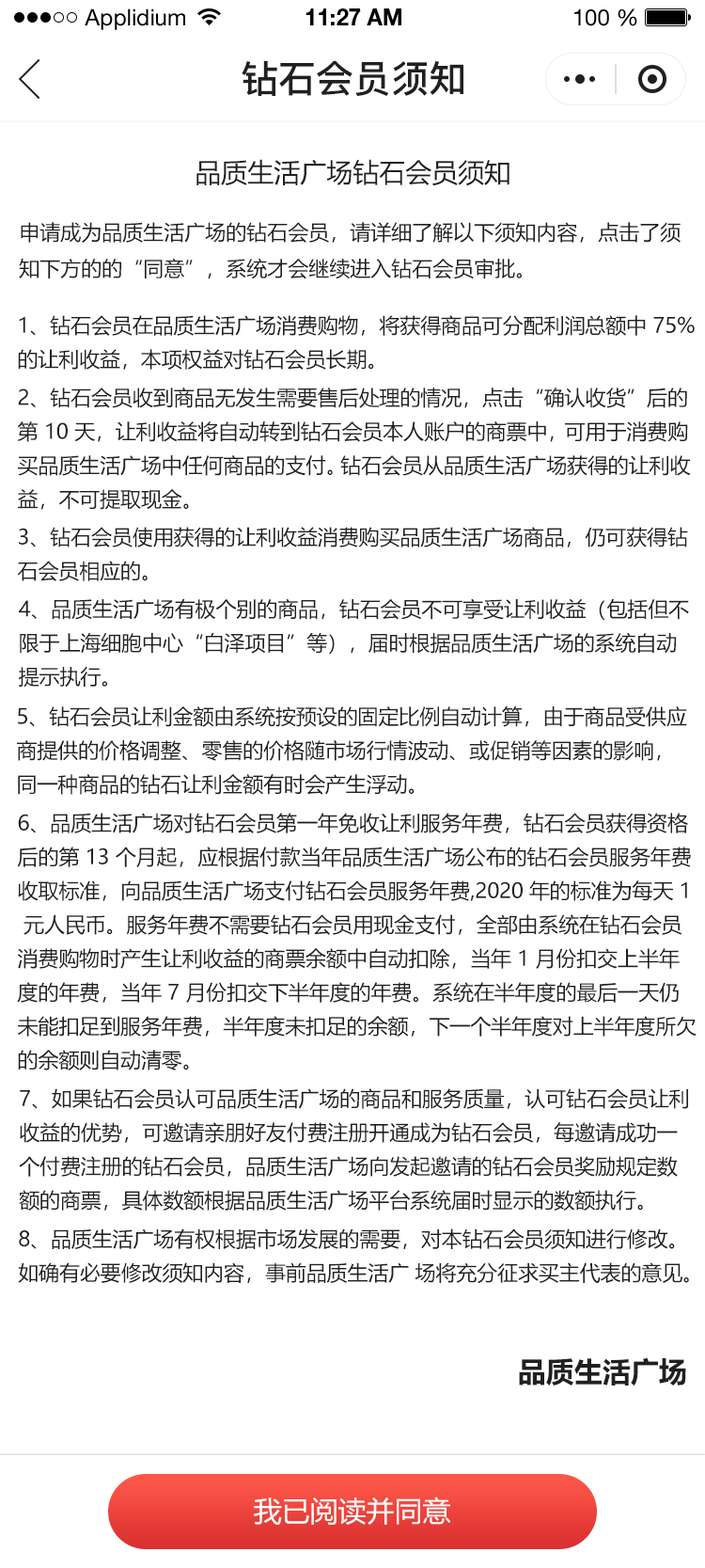
<style>
.page{position:relative;width:705px;height:1568px;background:#ffffff}
.page>*{position:absolute;margin:0}
.t1{font:22.6px "HelveticaNeueLTStd-Roman";color:#000000}
.t2{font:22.6px "HelveticaNeueLTStd-Bd";color:#000000}
.t3{font:37.6px "PingFang-SC-Bold";color:#202020;text-transform:uppercase}
.t4{font:26.3px "MicrosoftYaHei";color:#202020;text-transform:uppercase}
.t5{font:20.7px "MicrosoftYaHei";color:#202020;text-transform:uppercase}
.t6{font:20.7px/33.9px "MicrosoftYaHei";letter-spacing:-0.005em;color:#202020;text-transform:uppercase}
.t7{font:20.7px/33.9px "MicrosoftYaHei";letter-spacing:-0.165em;color:#202020;text-transform:uppercase}
.t8{font:20.7px/33.9px "MicrosoftYaHei";letter-spacing:-0.305em;color:#202020;text-transform:uppercase}
.t9{font:28.2px "MicrosoftYaHei-Bold";color:#202020;text-transform:uppercase}
.t10{font:28.2px "MicrosoftYaHei";color:#ffffff;text-transform:uppercase}
</style>
<div class="page">
<p class="t1" style="left:85px;top:8px;width:100px;height:22px">Applidium</p>
<p class="t2" style="left:306px;top:8px;width:96px;height:17px">11:27 AM</p>
<p class="t1" style="left:575px;top:8px;width:63px;height:18px">100 %</p>
<p class="t3" style="left:242px;top:60px;width:222px;height:36px">钻石会员须知</p>
<p class="t4" style="left:197px;top:159px;width:313px;height:27px">品质生活广场钻石会员须知</p>
<p class="t5" style="left:19px;top:222px;width:662px;height:57px">申请成为品质生活广场的钻石会员，请详细了解以下须知内容，点击了须<br>知下方的的“同意”，系统才会继续进入钻石会员审批。</p>
<p class="t6" style="left:18px;top:315px;width:677px;height:55px">1、钻石会员在品质生活广场消费购物，将获得商品可分配利润总额中 75%<br>的让利收益，本项权益对钻石会员长期。</p>
<p class="t6" style="left:17px;top:388px;width:674px;height:122px">2、钻石会员收到商品无发生需要售后处理的情况，点击“确认收货”后的<br>第 10 天，让利收益将自动转到钻石会员本人账户的商票中<span class="t7">，</span>可用于消费购<br>买品质生活广场中任何商品的支付<span class="t8">。</span>钻石会员从品质生活广场获得的让利收<br>益，不可提取现金。</p>
<p class="t6" style="left:17px;top:527px;width:672px;height:54px">3、钻石会员使用获得的让利收益消费购买品质生活广场商品，仍可获得钻<br>石会员相应的。</p>
<p class="t6" style="left:19px;top:598px;width:670px;height:90px">4、品质生活广场有极个别的商品，钻石会员不可享受让利收益（包括但不<br>限于上海细胞中心“白泽项目”等），届时根据品质生活广场的系统自动<br>提示执行。</p>
<p class="t6" style="left:17px;top:706px;width:671px;height:89px">5、钻石会员让利金额由系统按预设的固定比例自动计算，由于商品受供应<br>商提供的价格调整、零售的价格随市场行情波动、或促销等因素的影响，<br>同一种商品的钻石让利金额有时会产生浮动。</p>
<p class="t6" style="left:17px;top:813px;width:680px;height:257px">6、品质生活广场对钻石会员第一年免收让利服务年费，钻石会员获得资格<br>后的第 13 个月起，应根据付款当年品质生活广场公布的钻石会员服务年费<br>收取标准，向品质生活广场支付钻石会员服务年费,2020 年的标准为每天 1<br> 元人民币。服务年费不需要钻石会员用现金支付，全部由系统在钻石会员<br>消费购物时产生让利收益的商票余额中自动扣除，当年 1 月份扣交上半年<br>度的年费，当年 7 月份扣交下半年度的年费。系统在半年度的最后一天仍<br>未能扣足到服务年费，半年度未扣足的余额，下一个半年度对上半年度所欠<br>的余额则自动清零。</p>
<p class="t6" style="left:19px;top:1088px;width:670px;height:123px">7、如果钻石会员认可品质生活广场的商品和服务质量，认可钻石会员让利<br>收益的优势，可邀请亲朋好友付费注册开通成为钻石会员，每邀请成功一<br>个付费注册的钻石会员，品质生活广场向发起邀请的钻石会员奖励规定数<br>额的商票，具体数额根据品质生活广场平台系统届时显示的数额执行。</p>
<p class="t6" style="left:18px;top:1228px;width:671px;height:56px">8、品质生活广场有权根据市场发展的需要，对本钻石会员须知进行修改。<br>如确有必要修改须知内容，事前品质生活广 场将充分征求买主代表的意见。</p>
<p class="t9" style="left:519px;top:1357px;width:168px;height:29px">品质生活广场</p>
<p class="t10" style="left:254px;top:1497px;width:197px;height:28px">我已阅读并同意</p>
</div>
